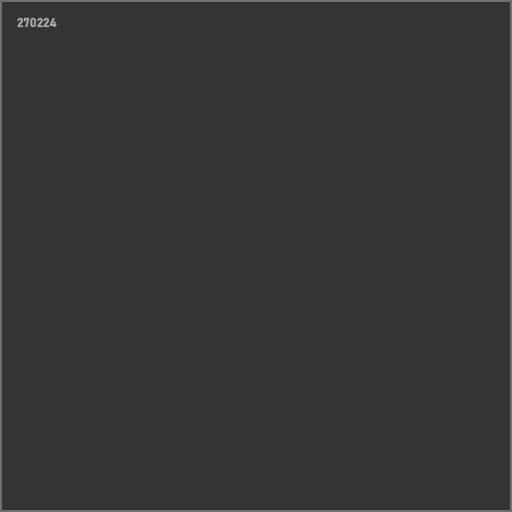
<style>
.page{position:relative;width:512px;height:512px;background:#343434}
.page>*{position:absolute;margin:0}
.t1{font:12.5px "Bahnschrift-Bold";color:#a7a7a7}
</style>
<div class="page">
<p class="t1" style="left:17px;top:17px;width:40px;height:11px">270224</p>
</div>
